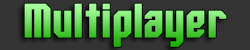
<style>
.page{position:relative;width:250px;height:50px;background:#333333}
.page>*{position:absolute;margin:0}
.t1{font:47.9px "Whitestone-Bold"}
</style>
<div class="page">
<p class="t1" style="left:24px;top:3px;width:203px;height:44px">Multiplayer</p>
</div>
